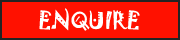
<style>
.page{position:relative;width:180px;height:40px;background:#ff1100}
.page>*{position:absolute;margin:0}
.t1{font:22px "Jokerman-Regular";color:#ffffff}
</style>
<div class="page">
<p class="t1" style="left:39px;top:8px;width:101px;height:23px">ENQUIRE</p>
</div>
